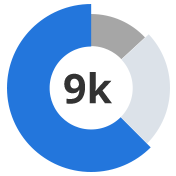
<style>
.page{position:relative;width:176px;height:176px;background:#ffffff}
.page>*{position:absolute;margin:0}
.t1{font:41px "OpenSans-Bold";color:#333333}
</style>
<div class="page">
<p class="t1" style="left:64px;top:72px;width:48px;height:32px">9k</p>
</div>
